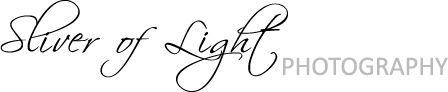
<style>
.page{position:relative;width:448px;height:92px;background:#ffffff}
.page>*{position:absolute;margin:0}
.t1{font:43.2px "Scriptina";letter-spacing:0.075em;color:#000000}
.t2{font:26.7px "Calibri";color:#bbbbbb}
</style>
<div class="page">
<p class="t1" style="left:0px;top:0px;width:288px;height:92px">Sliver of Light</p>
<p class="t2" style="left:283px;top:57px;width:165px;height:19px">PHOTOGRAPHY</p>
</div>
